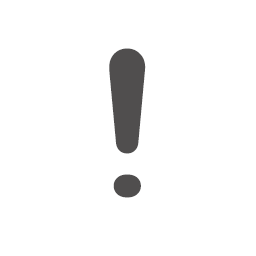
<style>
.page{position:relative;width:256px;height:256px;background:#ffffff}
.page>*{position:absolute;margin:0}
.t1{font:224px "CourierNewPS-BoldMT";color:#504e4e}
</style>
<div class="page">
<p class="t1" style="left:109px;top:48px;width:37px;height:150px">!</p>
</div>
